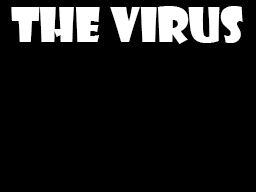
<style>
.page{position:relative;width:256px;height:192px;background:#000000}
.page>*{position:absolute;margin:0}
.t1{font:45.8px "ShowcardGothic-Reg";color:#ffffff}
</style>
<div class="page">
<p class="t1" style="left:11px;top:6px;width:232px;height:38px">The Virus</p>
</div>
